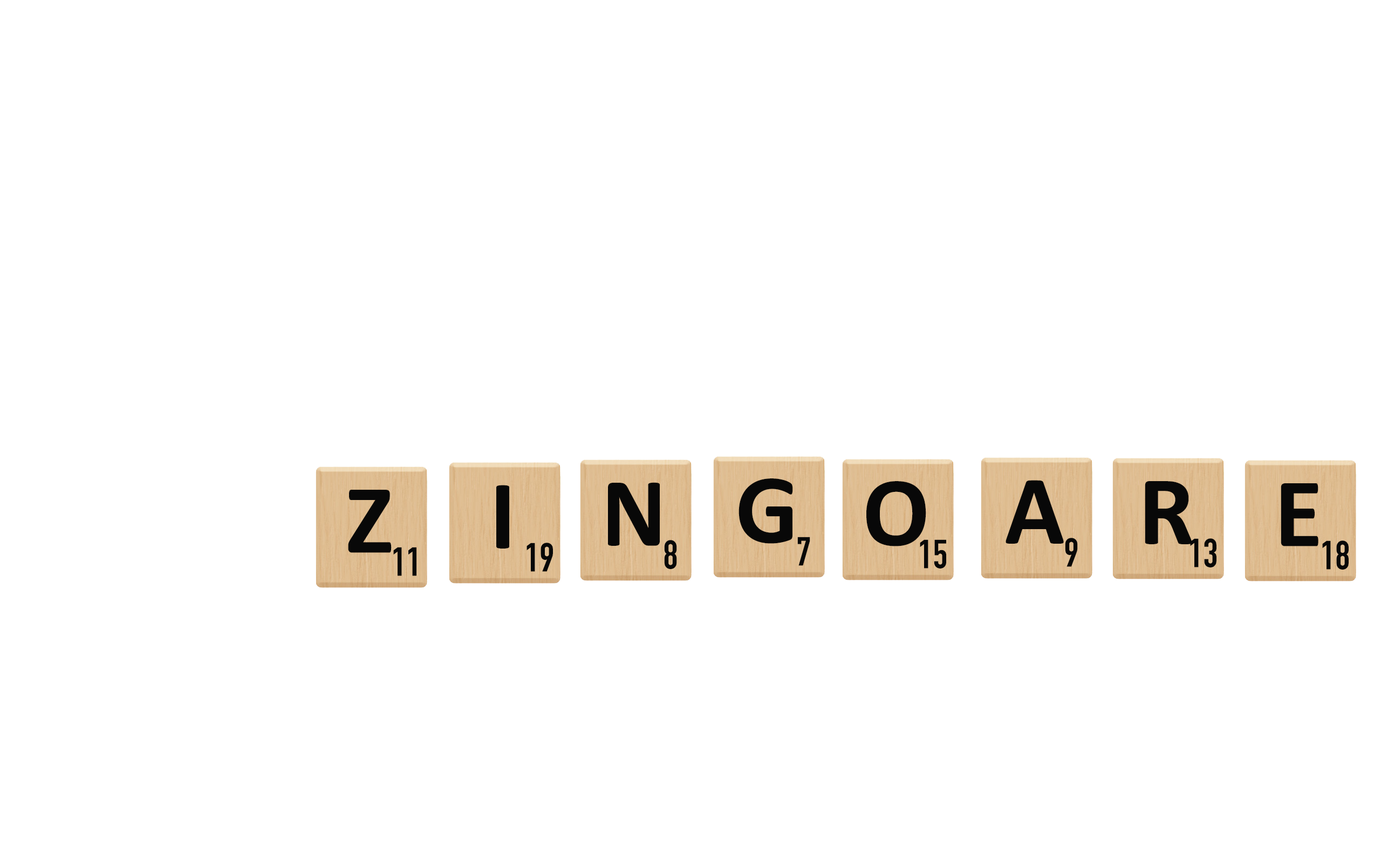
<style>
.page{position:relative;width:1381px;height:863px;background:#ffffff}
.page>*{position:absolute;margin:0}
.t1{font:99.3px "Calibri-Bold";color:#080808}
.t2{font:39.9px "DINCondensed-Bold";color:#080808}
</style>
<div class="page">
<p class="t1" style="left:496px;top:485px;width:13px;height:64px">I</p>
<p class="t1" style="left:608px;top:482px;width:52px;height:64px">N</p>
<p class="t1" style="left:739px;top:479px;width:54px;height:65px">G</p>
<p class="t1" style="left:867px;top:481px;width:59px;height:66px">O</p>
<p class="t1" style="left:1006px;top:480px;width:58px;height:64px">A</p>
<p class="t1" style="left:1145px;top:481px;width:47px;height:63px">R</p>
<p class="t1" style="left:1281px;top:483px;width:38px;height:64px">E</p>
<p class="t1" style="left:348px;top:490px;width:44px;height:63px">Z</p>
<p class="t2" style="left:527px;top:543px;width:26px;height:29px">19</p>
<p class="t2" style="left:664px;top:540px;width:13px;height:29px">8</p>
<p class="t2" style="left:797px;top:537px;width:13px;height:29px">7</p>
<p class="t2" style="left:920px;top:540px;width:26px;height:29px">15</p>
<p class="t2" style="left:1065px;top:538px;width:13px;height:29px">9</p>
<p class="t2" style="left:1190px;top:538px;width:27px;height:30px">13</p>
<p class="t2" style="left:1322px;top:541px;width:27px;height:29px">18</p>
<p class="t2" style="left:393px;top:547px;width:24px;height:29px">11</p>
</div>
